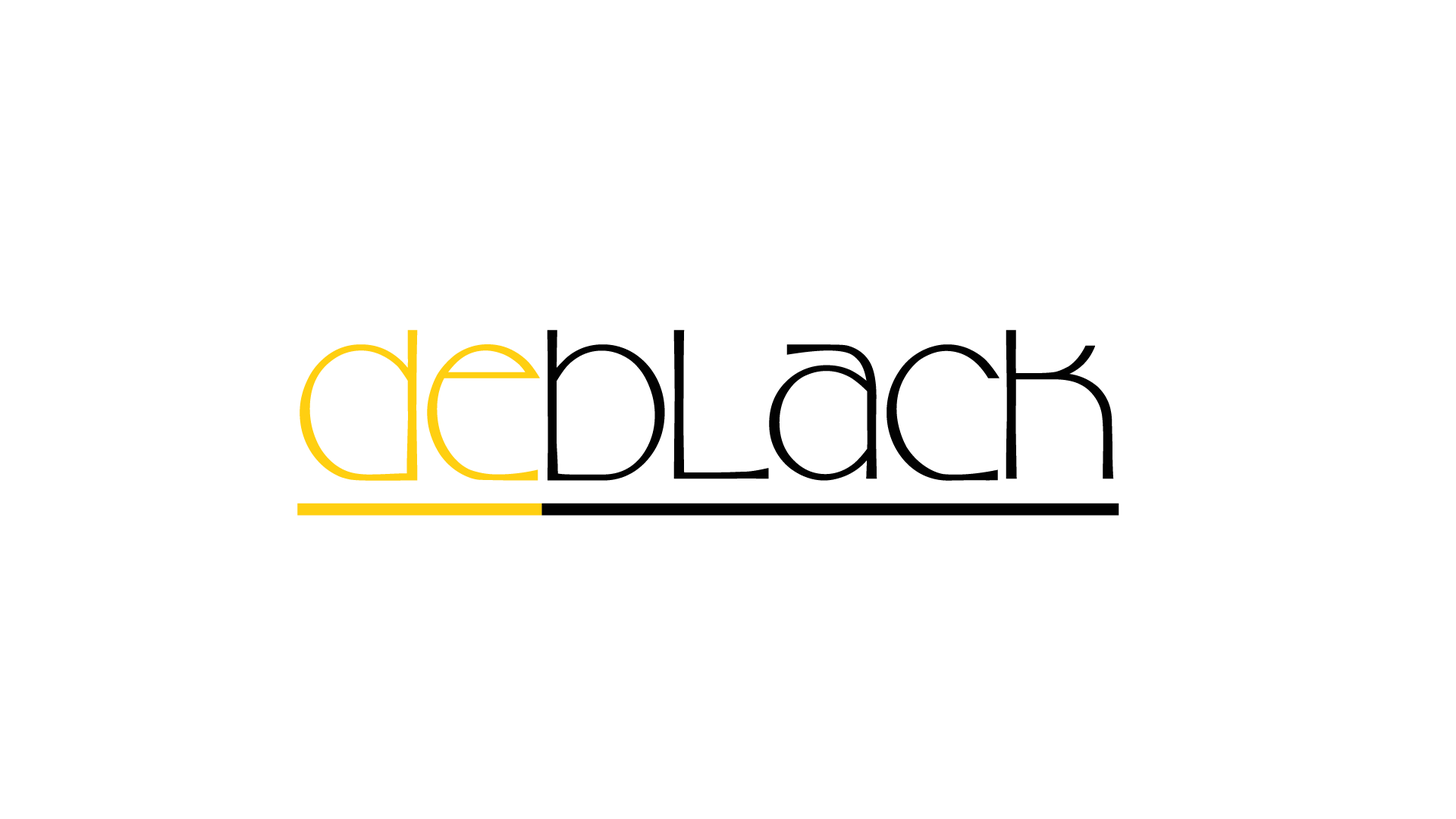
<style>
.page{position:relative;width:1456px;height:819px;background:#ffffff}
.page>*{position:absolute;margin:0}
.t1{font:222.4px "UTM-Camellia";color:#020202;font-weight:bold;text-decoration:underline;scale:0.88 1}
.t2{font:222.4px "UTM-Camellia";color:#ffcf11;font-weight:bold;text-decoration:underline;scale:0.88 1}
</style>
<div class="page">
<p class="t1" style="left:297px;top:330px;width:822px;height:186px"><span class="t2">De</span>Black</p>
</div>
